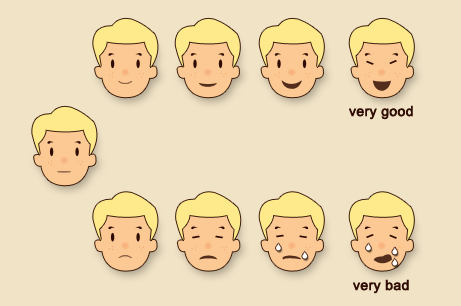
<style>
.page{position:relative;width:461px;height:306px;background:#f1e3c6}
.page>*{position:absolute;margin:0}
.t1{font:14px "ArialMT";color:#2f0c01;font-weight:bold}
</style>
<div class="page">
<p class="t1" style="left:349px;top:105px;width:64px;height:15px">very good</p>
<p class="t1" style="left:353px;top:279px;width:56px;height:15px">very bad</p>
</div>
